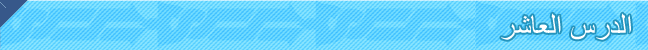
<style>
.page{position:relative;width:648px;height:50px}
.page>*{position:absolute;margin:0}
.t1{font:30px "ArialMT";color:#ffffff}
</style>
<div class="page">
<p class="t1" style="left:501px;top:13px;width:130px;height:27px">الدرس العاشر</p>
</div>
